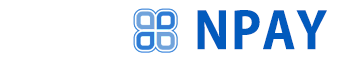
<style>
.page{position:relative;width:340px;height:60px;background:#ffffff}
.page>*{position:absolute;margin:0}
.t1{font:50px "AdobeGothicStd-Bold";color:#025abd;font-weight:bold}
</style>
<div class="page">
<p class="t1" style="left:197px;top:10px;width:130px;height:40px">NPAY</p>
</div>
